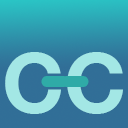
<style>
.page{position:relative;width:128px;height:128px}
.page>*{position:absolute;margin:0}
.t1{font:83.7px "HelveticaNeue-Bold";color:#a3e7e5}
.t2{font:95.3px "ArialRoundedMT-Bold";color:#2faba7;scale:0.95 1}
</style>
<div class="page">
<p class="t1" style="left:5px;top:52px;width:118px;height:62px">CC</p>
<p class="t2" style="left:41px;top:76px;width:28px;height:11px">-</p>
<p class="t2" style="left:61px;top:76px;width:28px;height:11px">-</p>
</div>
